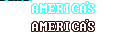
<style>
.page{position:relative;width:128px;height:32px;background:#ffffff}
.page>*{position:absolute;margin:0}
.t1{font:12.5px "Terminal";color:#fcfcfc}
</style>
<div class="page">
<p class="t1" style="left:32px;top:4px;width:62px;height:9px">AMERICAS</p>
</div>
